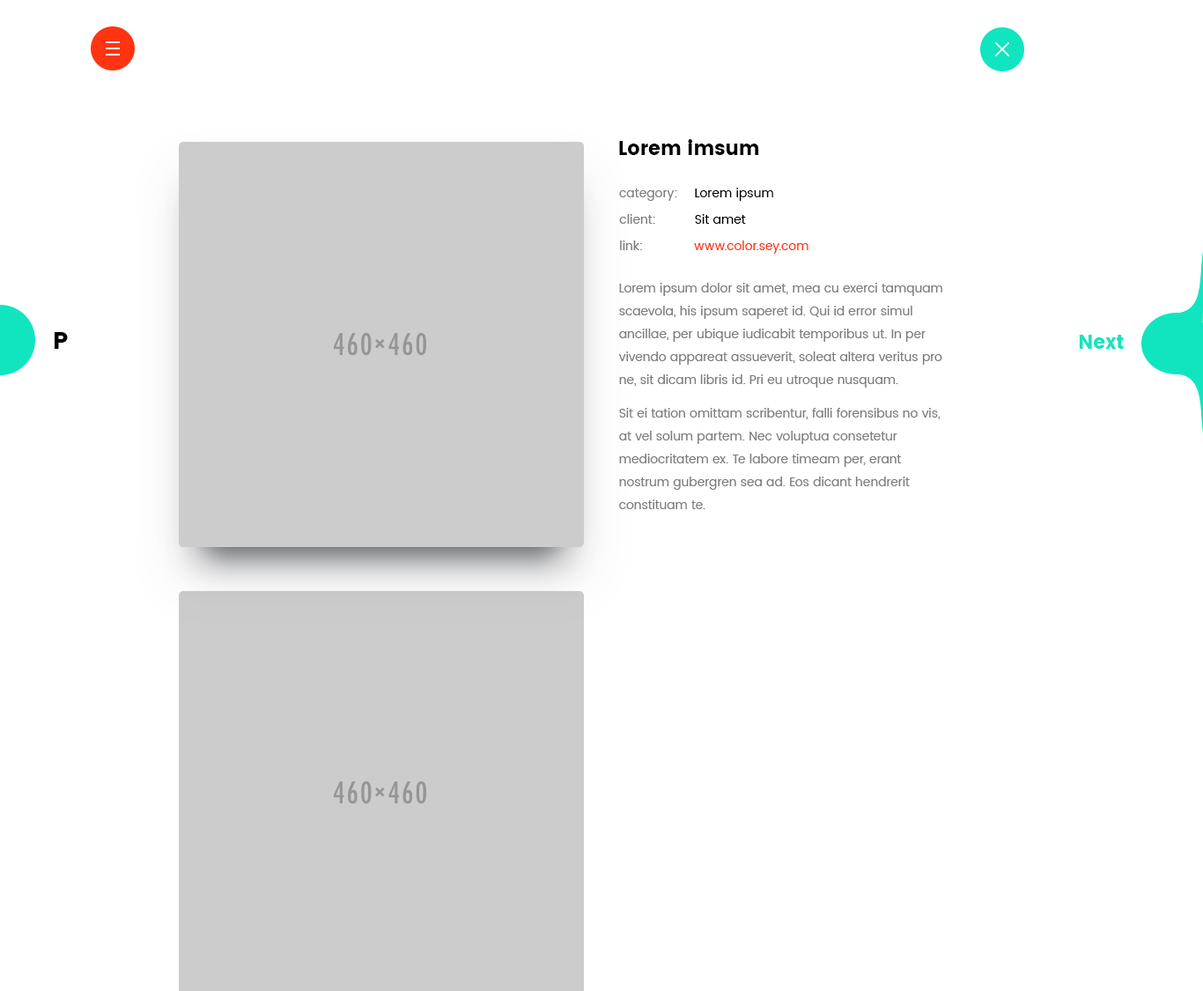
<style>
.page{position:relative;width:1203px;height:991px;background:#ffffff}
.page>*{position:absolute;margin:0}
.t1{font:19.4px "Poppins";color:#000000}
.t2{font:12.3px "Poppins-Regular";color:#7d7d7d}
.t3{font:12.3px "Poppins-Regular";color:#000000}
.t4{font:12.3px "Poppins-Regular";color:#ff3411}
.t5{font:12.3px/22.9px "Poppins-Regular";color:#7d7d7d}
.t6{font:23.8px "Poppins";color:#000000}
.t7{font:19.4px "Poppins";color:#11e5c0}
</style>
<div class="page">
<p class="t1" style="left:619px;top:139px;width:140px;height:16px">Lorem imsum</p>
<p class="t2" style="left:619px;top:189px;width:58px;height:12px">category:</p>
<p class="t3" style="left:695px;top:188px;width:78px;height:13px">Lorem ipsum</p>
<p class="t2" style="left:619px;top:214px;width:36px;height:10px">client:</p>
<p class="t3" style="left:695px;top:214px;width:51px;height:10px">Sit amet</p>
<p class="t2" style="left:620px;top:240px;width:22px;height:10px">link:</p>
<p class="t4" style="left:694px;top:240px;width:115px;height:14px">www.color.sey.com</p>
<p class="t5" style="left:618px;top:283px;width:325px;height:226px">Lorem ipsum dolor sit amet, mea cu exerci tamquam scaevola, his ipsum saperet id. Qui id error simul ancillae, per ubique iudicabit temporibus ut. In per vivendo appareat assueverit, soleat altera veritus pro ne, sit dicam libris id. Pri eu utroque nusquam.<br>Sit ei tation omittam scribentur, falli forensibus no vis, at vel solum partem. Nec voluptua consetetur mediocritatem ex. Te labore timeam per, erant nostrum gubergren sea ad. Eos dicant hendrerit constituam te.</p>
<p class="t6" style="left:55px;top:332px;width:13px;height:17px">P</p>
<p class="t7" style="left:1079px;top:335px;width:45px;height:14px">Next</p>
</div>
